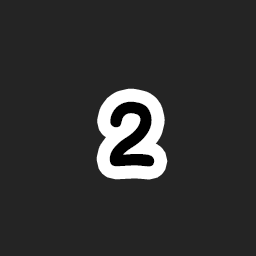
<style>
.page{position:relative;width:256px;height:256px;background:#242424}
.page>*{position:absolute;margin:0}
.t1{font:90px "ComicHelvetic-Medium";color:#000000}
</style>
<div class="page">
<p class="t1" style="left:109px;top:101px;width:46px;height:66px">2</p>
</div>
